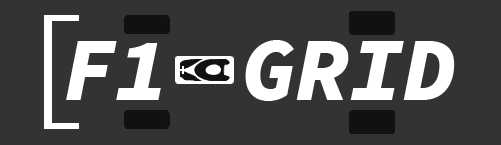
<style>
.page{position:relative;width:501px;height:145px;background:#333333}
.page>*{position:absolute;margin:0}
.t1{font:90px "SourceCodePro-BlackIt";color:#ffffff}
</style>
<div class="page">
<p class="t1" style="left:66px;top:40px;width:389px;height:61px">F1  GRID</p>
</div>
